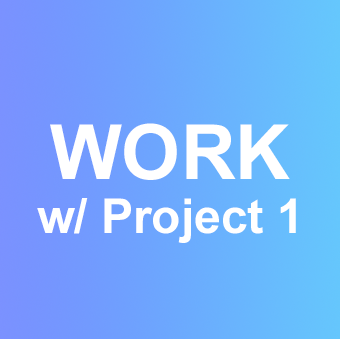
<style>
.page{position:relative;width:340px;height:339px}
.page>*{position:absolute;margin:0}
.t1{font:48px/18px "Arial-BoldMT";color:#ffffff}
.t2{font:75.9px/18px "Arial-BoldMT";color:#ffffff}
</style>
<div class="page">
<p class="t1" style="left:37px;top:123px;width:259px;height:120px;text-align:center"><span class="t2">WORK<br><br><br></span>w/ Project 1</p>
</div>
